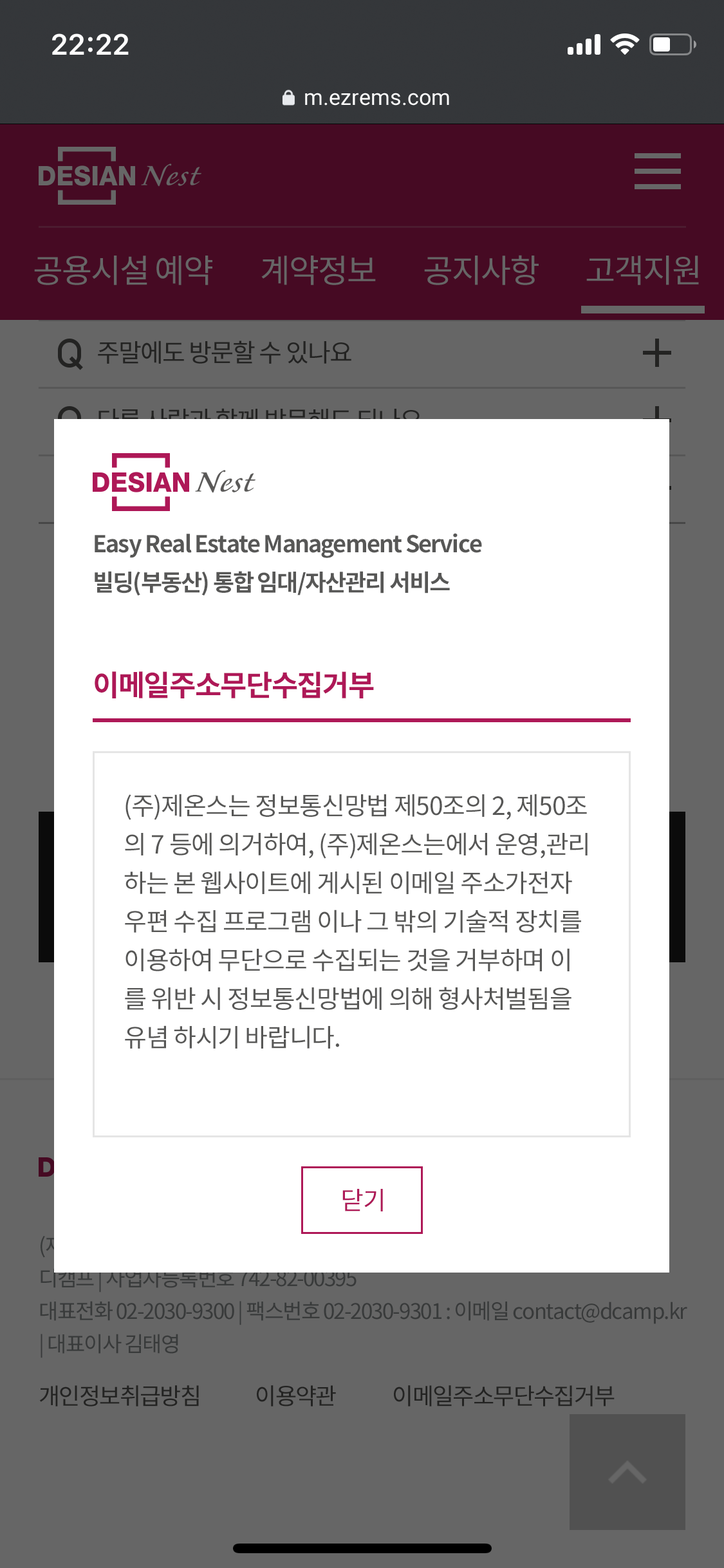
<style>
.page{position:relative;width:724px;height:1568px;background:#ffffff}
.page>*{position:absolute;margin:0}
.t1{font:23.2px/38.6px "NotoSansCJKkr-Bold";letter-spacing:-0.05em;color:#575756}
.t2{font:29px "NotoSansCJKkr-Bold";letter-spacing:-0.03em;color:#ae1857}
.t3{font:25.1px/38.6px "NotoSansCJKkr-Regular";letter-spacing:-0.035em;color:#575756}
.t4{font:25.1px "NotoSansCJKkr-Regular";letter-spacing:-0.035em;color:#ae1857}
</style>
<div class="page">
<p class="t1" style="left:95px;top:533px;width:387px;height:63px">Easy Real Estate Management Service<br>빌딩(부동산) 통합 임대/자산관리 서비스</p>
<p class="t2" style="left:95px;top:671px;width:279px;height:27px">이메일주소무단수집거부</p>
<p class="t3" style="left:124px;top:794px;width:464px;height:255px">(주)제온스는 정보통신망법 제50조의 2, 제50조<br>의 7 등에 의거하여, (주)제온스는에서 운영,관리<br>하는 본 웹사이트에 게시된 이메일 주소가전자<br>우편 수집 프로그램 이나 그 밖의 기술적 장치를 <br>이용하여 무단으로 수집되는 것을 거부하며 이<br>를 위반 시 정보통신망법에 의해 형사처벌됨을 <br>유념 하시기 바랍니다.</p>
<p class="t4" style="left:342px;top:1189px;width:41px;height:22px">닫기</p>
</div>
